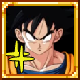
<style>
.page{position:relative;width:80px;height:80px}
.page>*{position:absolute;margin:0}
.t1{font:60px "IsaacSans";color:#f0f21d}
</style>
<div class="page">
<p class="t1" style="left:8px;top:44px;width:27px;height:29px">+</p>
</div>
